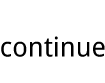
<style>
.page{position:relative;width:105px;height:83px;background:#ffffff}
.page>*{position:absolute;margin:0}
.t1{font:27.2px "DroidSans";color:#000000}
</style>
<div class="page">
<p class="t1" style="left:1px;top:36px;width:104px;height:21px">continue</p>
</div>
